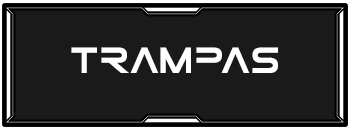
<style>
.page{position:relative;width:350px;height:130px;background:#1a1a1a}
.page>*{position:absolute;margin:0}
.t1{font:34.7px "ElementalEnd";color:#ffffff;text-transform:uppercase}
</style>
<div class="page">
<p class="t1" style="left:71px;top:47px;width:207px;height:26px">Trampas</p>
</div>
